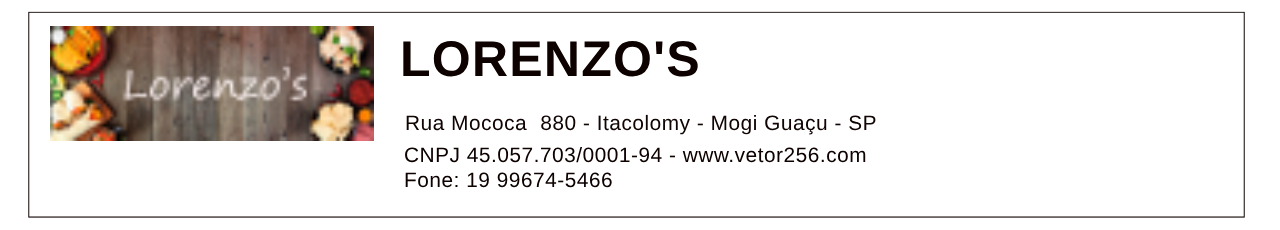
<style>
.page{position:relative;width:1280px;height:230px;background:#ffffff}
.page>*{position:absolute;margin:0}
.t1{font:50px "Arial-BoldMT";letter-spacing:0.025em;color:#0d0200}
.t2{font:20.8px "ArialMT";letter-spacing:0.025em;color:#0d0200}
</style>
<div class="page">
<p class="t1" style="left:403px;top:41px;width:295px;height:36px">LORENZO'S</p>
<p class="t2" style="left:406px;top:114px;width:470px;height:21px">Rua Mococa  880 - Itacolomy - Mogi Guaçu - SP</p>
<p class="t2" style="left:405px;top:146px;width:461px;height:17px">CNPJ 45.057.703/0001-94 - www.vetor256.com</p>
<p class="t2" style="left:405px;top:172px;width:207px;height:16px">Fone: 19 99674-5466</p>
</div>
